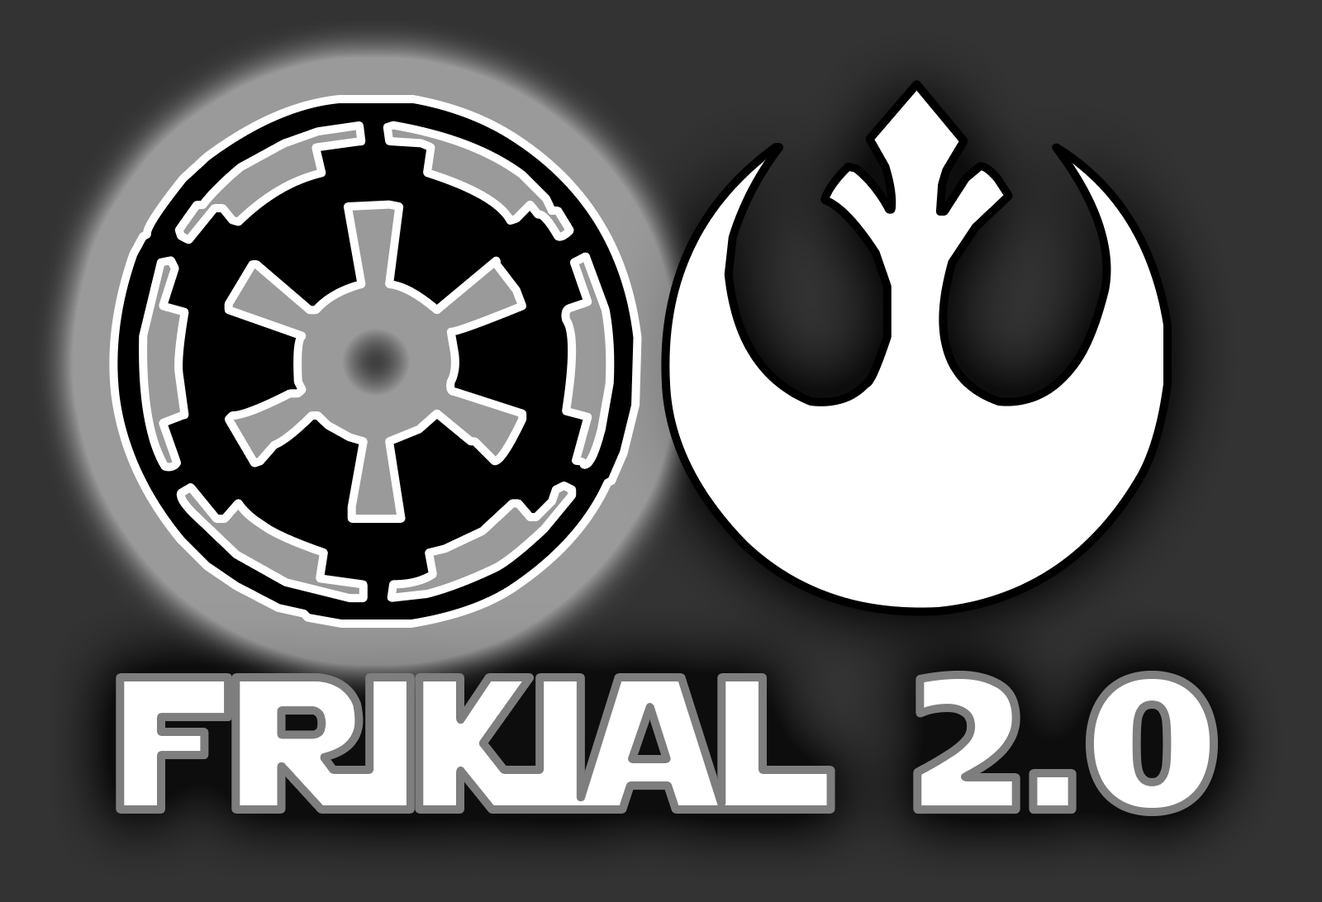
<style>
.page{position:relative;width:1322px;height:902px;background:#333333}
.page>*{position:absolute;margin:0}
.t1{font:564.2px "StarJedi";color:#ffffff}
.t2{font:587.4px "StarJedi";color:#000000}
.t3{font:187.3px "StarJedi";color:#ffffff;scale:0.95 1}
</style>
<div class="page">
<p class="t1" style="left:665px;top:84px;width:502px;height:528px">$</p>
<p class="t2" style="left:113px;top:99px;width:525px;height:525px">#</p>
<p class="t3" style="left:120px;top:675px;width:1094px;height:137px">frikial 2.0</p>
</div>
